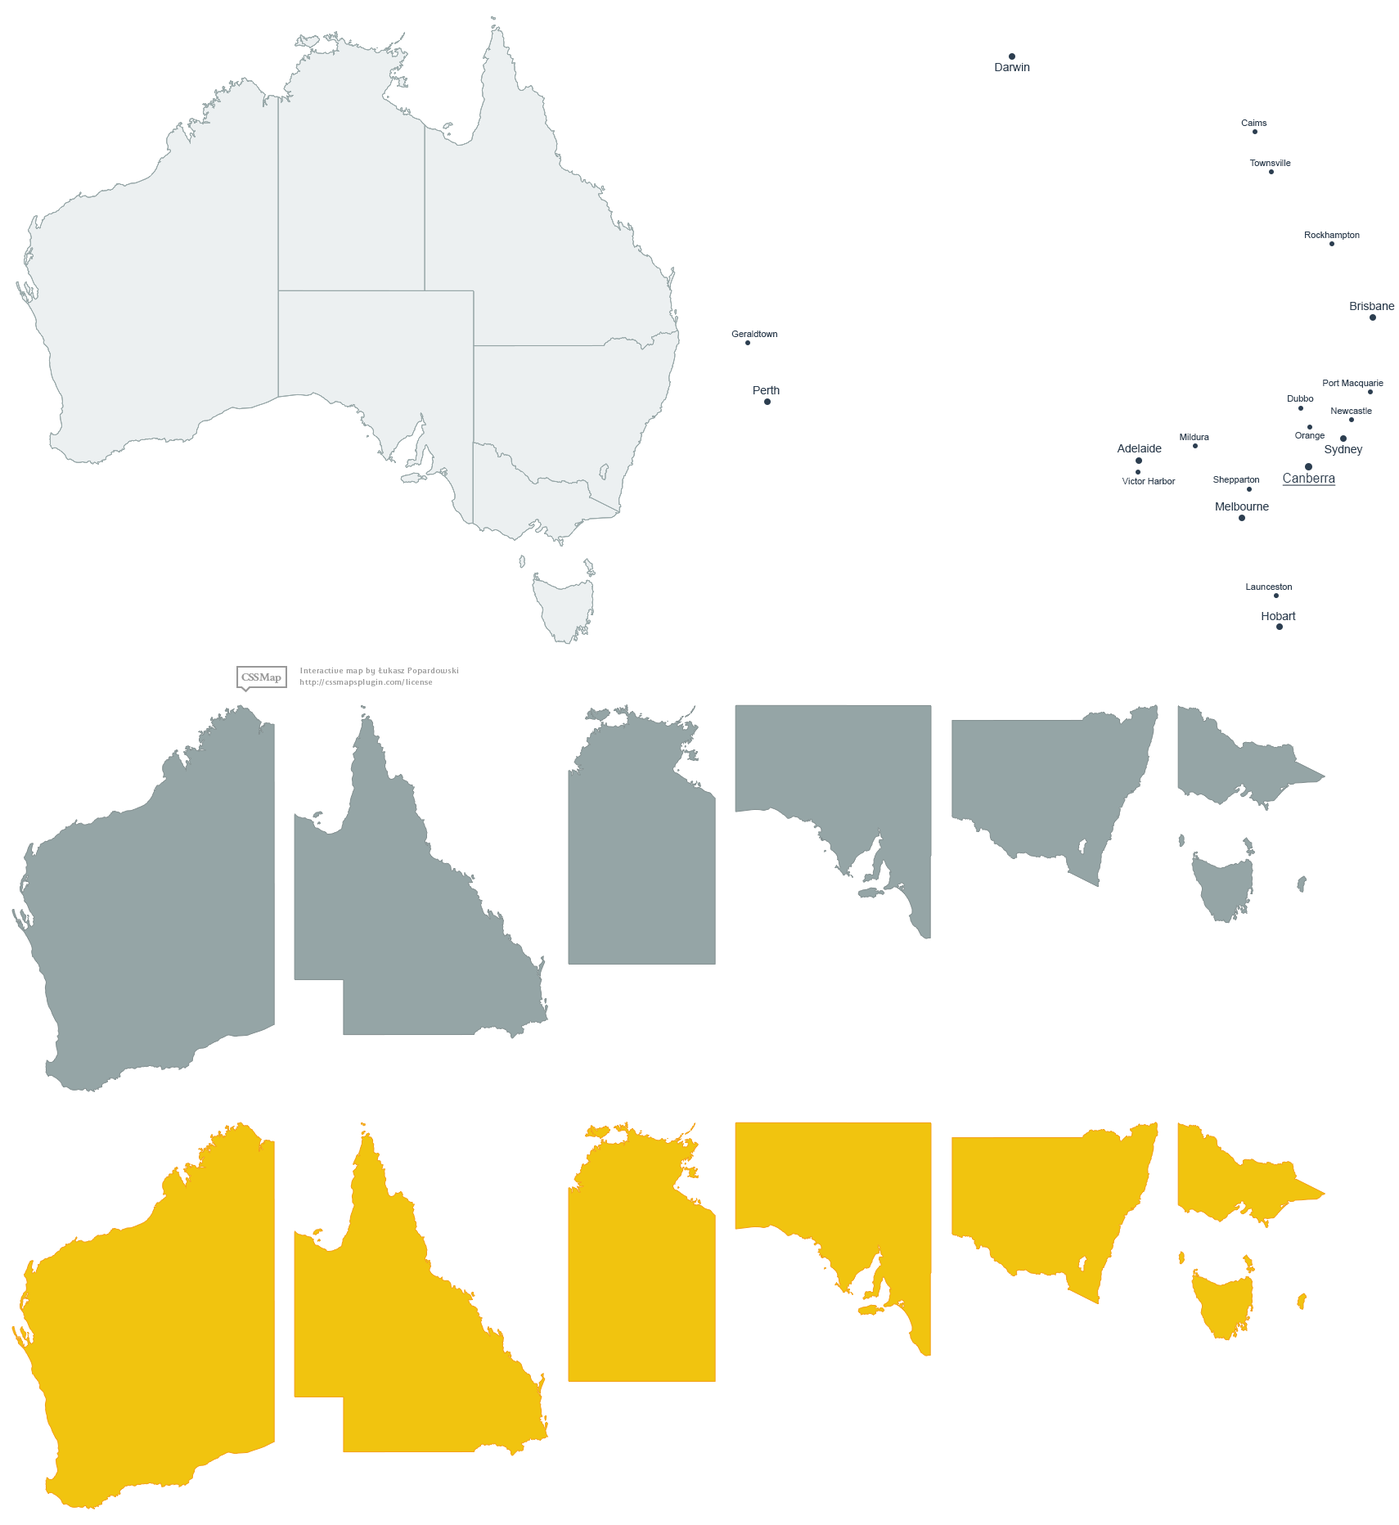
<style>
.page{position:relative;width:1399px;height:1525px;background:#ffffff}
.page>*{position:absolute;margin:0}
.t1{font:11.5px "ArialMT";color:#2c3e50}
.t2{font:9px "ArialMT";color:#2c3e50}
.t3{font:13.1px "ArialMT";color:#2c3e50;text-decoration:underline;scale:0.97 1}
</style>
<div class="page">
<p class="t1" style="left:995px;top:63px;width:35px;height:8px">Darwin</p>
<p class="t2" style="left:1241px;top:119px;width:26px;height:7px">Caims</p>
<p class="t2" style="left:1249px;top:160px;width:42px;height:6px">Townsville</p>
<p class="t2" style="left:1305px;top:232px;width:55px;height:8px">Rockhampton</p>
<p class="t1" style="left:1350px;top:302px;width:45px;height:8px">Brisbane</p>
<p class="t2" style="left:731px;top:331px;width:46px;height:6px">Geraldtown</p>
<p class="t1" style="left:754px;top:385px;width:26px;height:9px">Perth</p>
<p class="t2" style="left:1323px;top:380px;width:61px;height:8px">Port Macquarie</p>
<p class="t2" style="left:1288px;top:395px;width:26px;height:7px">Dubbo</p>
<p class="t2" style="left:1331px;top:407px;width:41px;height:7px">Newcastle</p>
<p class="t2" style="left:1180px;top:434px;width:29px;height:6px">Mildura</p>
<p class="t2" style="left:1295px;top:432px;width:30px;height:8px">Orange</p>
<p class="t1" style="left:1117px;top:444px;width:45px;height:8px">Adelaide</p>
<p class="t1" style="left:1325px;top:445px;width:38px;height:11px">Sydney</p>
<p class="t3" style="left:1282px;top:473px;width:54px;height:13px">Canberra</p>
<p class="t2" style="left:1122px;top:478px;width:54px;height:6px">Victor Harbor</p>
<p class="t2" style="left:1213px;top:476px;width:46px;height:8px">Shepparton</p>
<p class="t1" style="left:1216px;top:502px;width:53px;height:9px">Melbourne</p>
<p class="t2" style="left:1246px;top:583px;width:46px;height:7px">Launceston</p>
<p class="t1" style="left:1262px;top:611px;width:34px;height:9px">Hobart</p>
</div>
